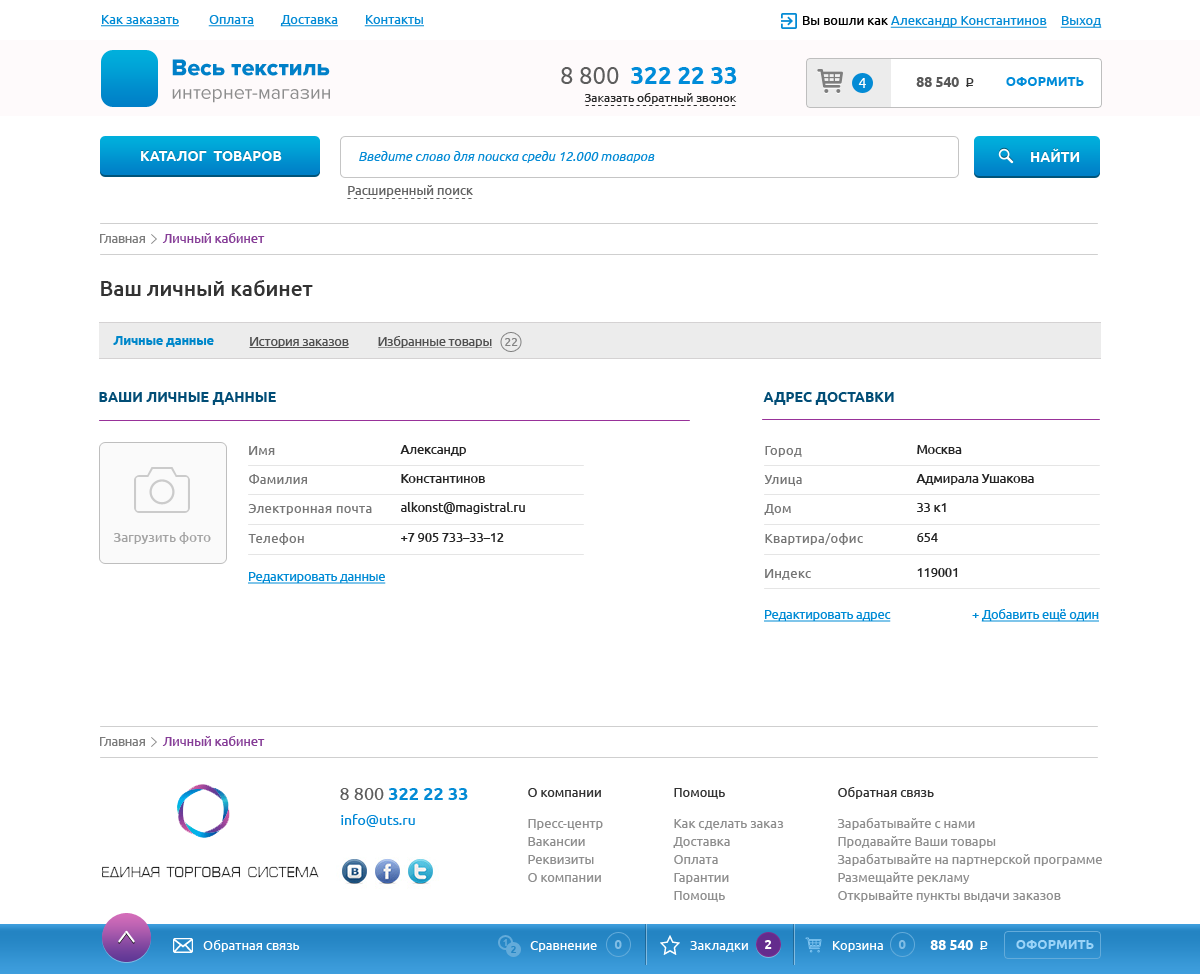
<style>
.page{position:relative;width:1200px;height:974px;background:#ffffff}
.page>*{position:absolute;margin:0}
.t1{font:13px "Ubuntu";color:#048bd5;text-decoration:underline}
.t2{font:13px "Ubuntu";color:#008bd5;text-decoration:underline}
.t3{font:13px "Ubuntu";color:#000000}
.t4{font:19.6px "ProximaNova-Regular";color:#8d8d8d}
.t5{font:23.5px "ProximaNova-Extrabld";color:#0080c8}
.t6{font:24px "Ubuntu-Bold";color:#008cd9}
.t7{font:24px "Ubuntu";color:#5d5d5d}
.t8{font:14px "Ubuntu";color:#ffffff}
.t9{font:14px "Ubuntu-Bold";color:#585858}
.t10{font:13px "Ubuntu";color:#333333}
.t11{font:13px "Ubuntu-Bold";color:#008cd9;text-transform:uppercase}
.t12{font:12px "Ubuntu";color:#2a2a2a}
.t13{font:14px "Ubuntu-Bold";color:#ffffff;text-transform:uppercase}
.t14{font:13px "Ubuntu-Italic";color:#048bd5}
.t15{font:13px "Ubuntu";color:#626262}
.t16{font:12px "Ubuntu";color:#626262}
.t17{font:12.5px "Ubuntu-Medium";color:#863d97}
.t18{font:12.5px "Ubuntu";color:#7c7c7c}
.t19{font:20.8px "Ubuntu-Medium";color:#333333}
.t20{font:12.5px "Ubuntu-Bold";color:#0087ca}
.t21{font:12.5px "Ubuntu";color:#505050;text-decoration:underline}
.t22{font:12px "Ubuntu";color:#838383}
.t23{font:14px "Ubuntu-Bold";color:#014d76}
.t24{font:12.5px/29.2px "Ubuntu";letter-spacing:0.05em;color:#767676}
.t25{font:12.5px/29.2px "Ubuntu-Medium";color:#242424}
.t26{font:13px "Ubuntu-Medium";color:#a3a3a3}
.t27{font:12.5px "Ubuntu";letter-spacing:0.05em;color:#767676}
.t28{font:12.5px "Ubuntu-Medium";color:#242424}
.t29{font:12.5px "Ubuntu";color:#008bd5;text-decoration:underline}
.t30{font:12.5px "Ubuntu";color:#008bd5}
.t31{font:18px "Ubuntu-Bold";color:#048bd5}
.t32{font:18px "Ubuntu";color:#5d5d5d}
.t33{font:13px/18px "Ubuntu";color:#8e8e8e}
.t34{font:13px/18px "Ubuntu";color:#323232}
.t35{font:14px "Ubuntu";color:#0289d7}
.t36{font:13px "Ubuntu";color:#ffffff}
.t37{font:10px "Ubuntu-Bold";color:#63abda}
.t38{font:13px "Ubuntu-Bold";color:#80bde5}
.t39{font:13px "Ubuntu-Bold";color:#ffffff}
.t40{font:14px "Ubuntu-Bold";color:#ffffff}
.t41{font:13px "Ubuntu-Bold";color:#9ad3f8;text-transform:uppercase}
.t42{font:10px "Ubuntu-Bold";color:#2586c4}
</style>
<div class="page">
<p class="t1" style="left:101px;top:15px;width:323px;height:12px"><span class="t2">Как заказать          </span>Оплата         Доставка         Контакты</p>
<p class="t1" style="left:803px;top:16px;width:244px;height:12px"><span class="t3">Вы вошли как </span>Александр Константинов</p>
<p class="t1" style="left:1060px;top:16px;width:42px;height:12px">Выход</p>
<p class="t4" style="left:172px;top:59px;width:158px;height:44px"><span class="t5">Весь текстиль<br></span>интернет-магазин</p>
<p class="t6" style="left:561px;top:67px;width:176px;height:17px"><span class="t7">8 800  </span>322 22 33</p>
<p class="t8" style="left:858px;top:78px;width:8px;height:10px">4</p>
<p class="t9" style="left:916px;top:77px;width:43px;height:10px">88 540</p>
<p class="t10" style="left:966px;top:78px;width:8px;height:9px">P</p>
<p class="t11" style="left:1006px;top:77px;width:78px;height:9px">Оформить</p>
<p class="t10" style="left:966px;top:85px;width:7px;height:1px">_</p>
<p class="t12" style="left:584px;top:93px;width:153px;height:11px">Заказать обратный звонок</p>
<p class="t12" style="left:585px;top:105px;width:151px;height:1px">- - - - - - - - - - - - - - - - - - - - - - - -</p>
<p class="t13" style="left:1031px;top:148px;width:49px;height:14px">НАЙТИ</p>
<p class="t13" style="left:141px;top:151px;width:141px;height:10px">Каталог  товаров</p>
<p class="t14" style="left:359px;top:151px;width:296px;height:12px">Введите слово для поиска среди 12.000 товаров</p>
<p class="t15" style="left:348px;top:185px;width:125px;height:12px">Расширенный поиск</p>
<p class="t16" style="left:347px;top:198px;width:125px;height:1px">- - - - - - - - - - - - - - - - - - - -</p>
<p class="t17" style="left:100px;top:233px;width:165px;height:10px"><span class="t18">Главная      </span>Личный кабинет</p>
<p class="t19" style="left:101px;top:280px;width:212px;height:16px">Ваш личный кабинет</p>
<p class="t20" style="left:113px;top:336px;width:101px;height:11px">Личные данные</p>
<p class="t21" style="left:249px;top:337px;width:100px;height:11px">История заказов</p>
<p class="t21" style="left:378px;top:336px;width:114px;height:13px">Избранные товары</p>
<p class="t22" style="left:505px;top:338px;width:13px;height:8px">22</p>
<p class="t23" style="left:99px;top:392px;width:177px;height:13px">ВАШИ ЛИЧНЫЕ ДАННЫЕ</p>
<p class="t23" style="left:763px;top:392px;width:131px;height:13px">АДРЕС ДОСТАВКИ</p>
<p class="t24" style="left:248px;top:446px;width:124px;height:99px">Имя<br>Фамилия<br>Электронная почта<br>Телефон</p>
<p class="t25" style="left:400px;top:445px;width:125px;height:97px">Александр<br>Константинов<br>alkonst@magistral.ru<br>+7 905 733–33–12</p>
<p class="t24" style="left:764px;top:446px;width:99px;height:99px">Город<br>Улица<br>Дом<br>Квартира/офис</p>
<p class="t25" style="left:916px;top:445px;width:118px;height:97px">Москва<br>Адмирала Ушакова<br>33 к1<br>654</p>
<p class="t26" style="left:113px;top:532px;width:98px;height:12px">Загрузить фото</p>
<p class="t27" style="left:765px;top:569px;width:46px;height:11px">Индекс</p>
<p class="t28" style="left:917px;top:568px;width:41px;height:9px">119001</p>
<p class="t29" style="left:248px;top:572px;width:138px;height:12px">Редактировать данные</p>
<p class="t29" style="left:764px;top:610px;width:127px;height:12px">Редактировать адрес</p>
<p class="t29" style="left:972px;top:609px;width:127px;height:13px"><span class="t30">+ </span>Добавить ещё один</p>
<p class="t17" style="left:100px;top:736px;width:165px;height:10px"><span class="t18">Главная      </span>Личный кабинет</p>
<p class="t31" style="left:340px;top:788px;width:128px;height:12px"><span class="t32">8 800 </span>322 22 33</p>
<p class="t33" style="left:528px;top:788px;width:75px;height:94px"><span class="t34">О компании<br></span>Пресс-центр<br>Вакансии<br>Реквизиты<br>О компании</p>
<p class="t33" style="left:673px;top:788px;width:111px;height:114px"><span class="t34">Помощь<br></span>Как сделать заказ<br>Доставка<br>Оплата<br>Гарантии<br>Помощь</p>
<p class="t33" style="left:837px;top:787px;width:265px;height:115px"><span class="t34">Обратная связь<br></span>Зарабатывайте с нами<br>Продавайте Ваши товары<br>Зарабатывайте на партнерской программе<br>Размещайте рекламу<br>Открывайте пункты выдачи заказов</p>
<p class="t35" style="left:341px;top:814px;width:74px;height:13px">info@uts.ru</p>
<p class="t36" style="left:203px;top:940px;width:97px;height:12px">Обратная связь</p>
<p class="t37" style="left:503px;top:939px;width:4px;height:7px">1</p>
<p class="t36" style="left:530px;top:941px;width:67px;height:11px">Сравнение</p>
<p class="t38" style="left:614px;top:940px;width:8px;height:9px">0</p>
<p class="t36" style="left:690px;top:941px;width:58px;height:11px">Закладки</p>
<p class="t39" style="left:764px;top:940px;width:8px;height:9px">2</p>
<p class="t36" style="left:833px;top:941px;width:50px;height:11px">Корзина</p>
<p class="t38" style="left:898px;top:940px;width:8px;height:9px">0</p>
<p class="t40" style="left:930px;top:940px;width:43px;height:10px">88 540</p>
<p class="t36" style="left:980px;top:941px;width:8px;height:9px">P</p>
<p class="t41" style="left:1016px;top:940px;width:78px;height:9px">Оформить</p>
<p class="t42" style="left:511px;top:946px;width:5px;height:7px">2</p>
<p class="t36" style="left:980px;top:948px;width:7px;height:1px">_</p>
</div>
